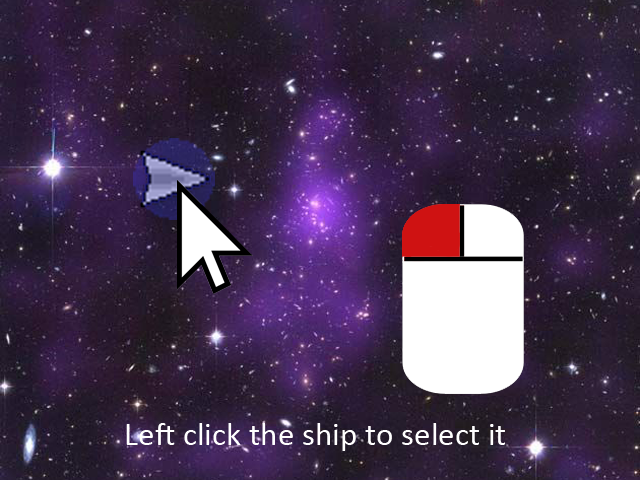
<style>
.page{position:relative;width:640px;height:480px}
.page>*{position:absolute;margin:0}
.t1{font:33.3px "Calibri";color:#ffffff}
</style>
<div class="page">
<p class="t1" style="left:126px;top:423px;width:379px;height:28px">Left click the ship to select it</p>
</div>
